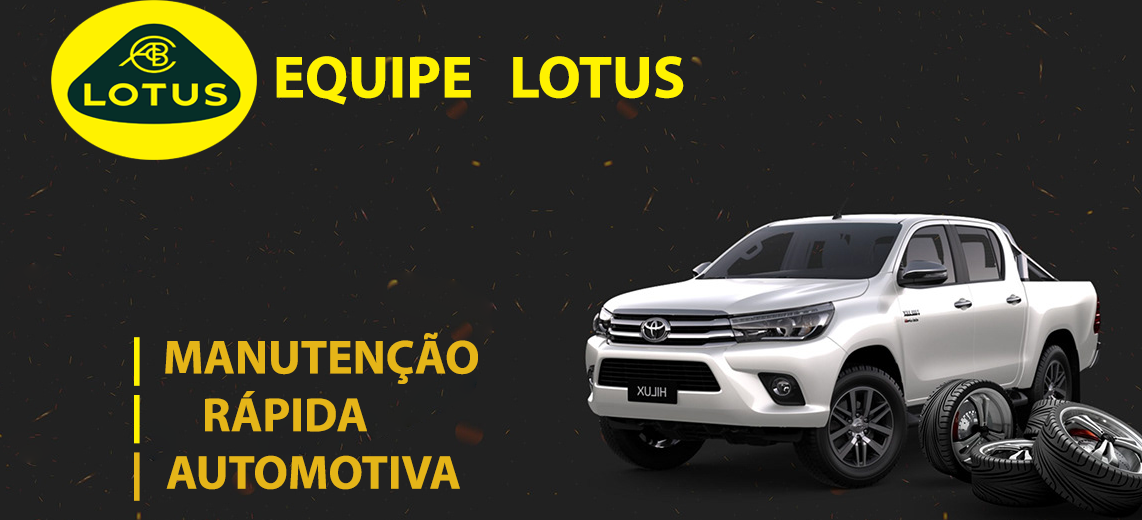
<style>
.page{position:relative;width:1142px;height:520px;background:#212121}
.page>*{position:absolute;margin:0}
.t1{font:60px "MyriadPro-Bold";color:#fff200}
.t2{font:48px "MyriadPro-Bold";color:#e5b518}
.t3{font:48px "MyriadPro-Bold";color:#fff200}
</style>
<div class="page">
<p class="t1" style="left:276px;top:56px;width:408px;height:49px">EQUIPE   LOTUS</p>
<p class="t2" style="left:134px;top:332px;width:344px;height:169px"><span class="t3">|  </span>MANUTENÇÃO<br><span class="t3">|  </span>RÁPIDA <br>| AUTOMOTIVA</p>
</div>
